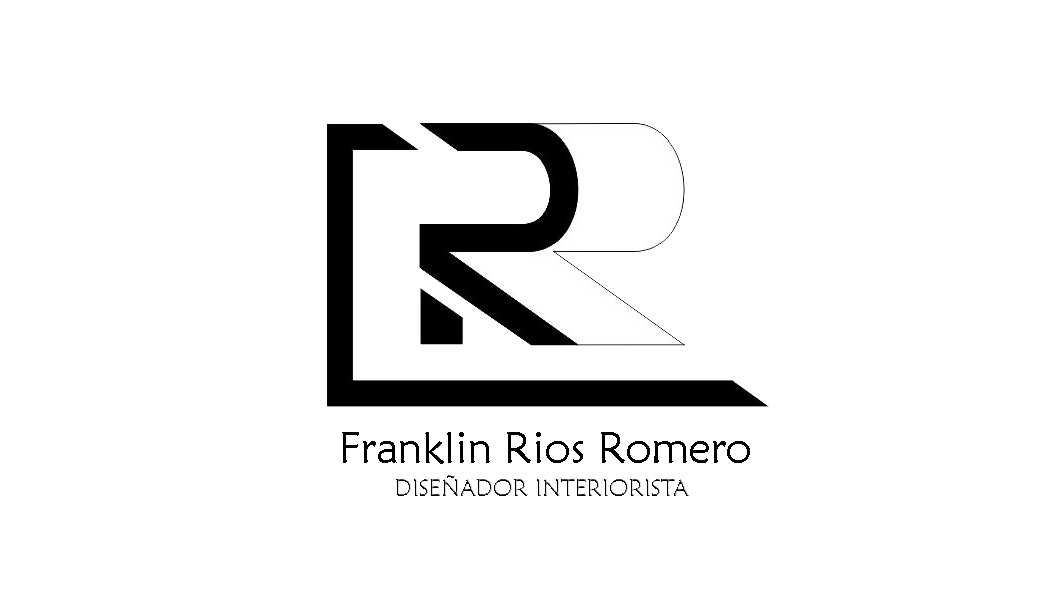
<style>
.page{position:relative;width:1064px;height:592px;background:#ffffff}
.page>*{position:absolute;margin:0}
.t1{font:44px "MaiandraGD-Regular";color:#000000}
.t2{font:24px "MaiandraGD-Regular"}
</style>
<div class="page">
<p class="t1" style="left:342px;top:432px;width:408px;height:32px">Franklin Rios Romero</p>
<p class="t2" style="left:396px;top:475px;width:293px;height:21px">DISEÑADOR INTERIORISTA</p>
</div>
